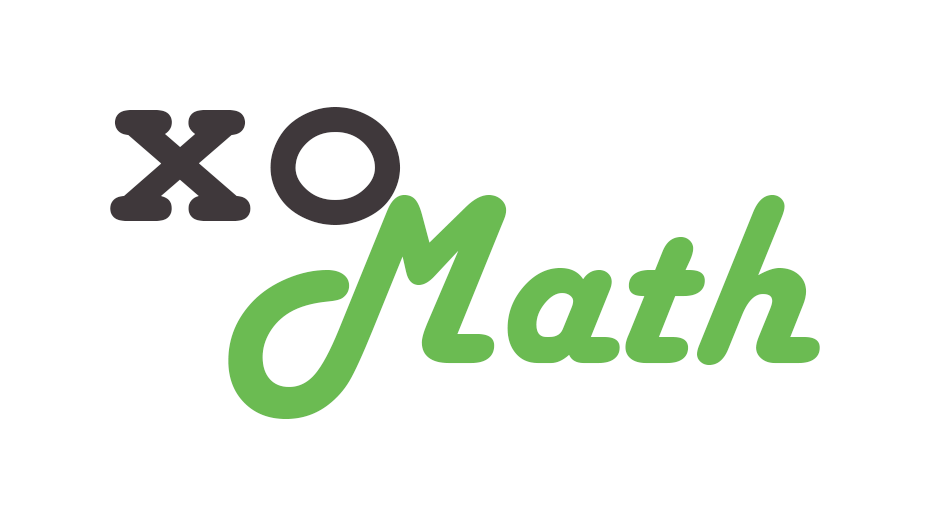
<style>
.page{position:relative;width:930px;height:530px;background:#ffffff}
.page>*{position:absolute;margin:0}
.t1{font:250px "CourierNewPS-BoldMT";letter-spacing:0.02em;color:#3f383b}
.t2{font:250px "HarlowSolid";color:#6bbb52}
.t3{font:250px "HarlowSolid";color:#bc7ee3}
</style>
<div class="page">
<p class="t1" style="left:110px;top:107px;width:291px;height:118px">xo</p>
<p class="t2" style="left:228px;top:195px;width:592px;height:224px"><span class="t3"><br></span>Math</p>
</div>
